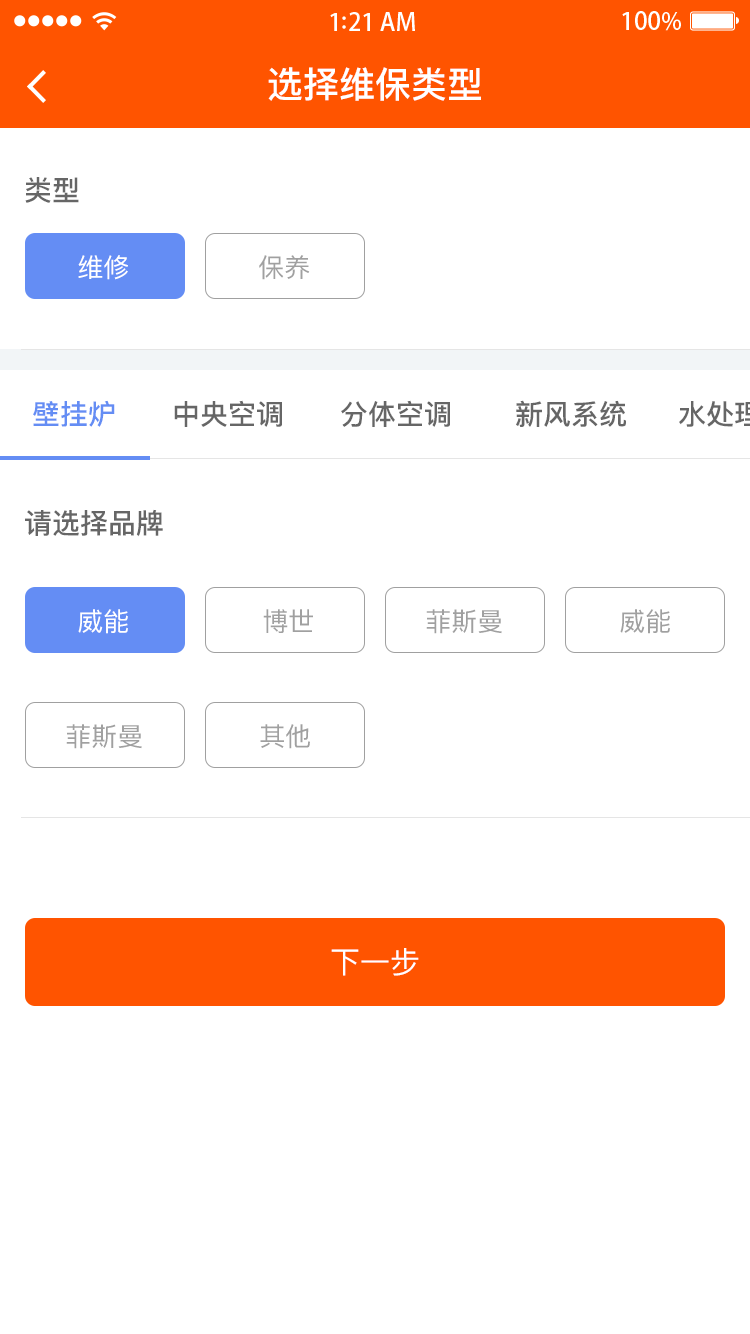
<style>
.page{position:relative;width:750px;height:1334px;background:#ffffff}
.page>*{position:absolute;margin:0}
.t1{font:36px "PingFangSC-Medium";color:#ffffff}
.t2{font:28px "PingFangSC-Medium";color:#666666}
.t3{font:26px "PingFangSC-Regular";color:#ffffff;text-transform:uppercase}
.t4{font:26px "PingFangSC-Regular";color:#a0a0a0;text-transform:uppercase}
.t5{font:28px "PingFangSC-Medium";color:#648df4}
.t6{font:28px "PingFang-SC-Bold";color:#666666}
.t7{font:30px "PingFangSC-Regular";color:#ffffff;text-transform:uppercase}
</style>
<div class="page">
<p class="t1" style="left:268px;top:67px;width:213px;height:34px">选择维保类型</p>
<p class="t2" style="left:25px;top:177px;width:54px;height:26px">类型</p>
<p class="t3" style="left:78px;top:255px;width:50px;height:25px">维修</p>
<p class="t4" style="left:259px;top:255px;width:51px;height:25px">保养</p>
<p class="t5" style="left:33px;top:400px;width:82px;height:27px">壁挂炉</p>
<p class="t2" style="left:174px;top:400px;width:108px;height:27px">中央空调</p>
<p class="t2" style="left:341px;top:400px;width:109px;height:27px">分体空调</p>
<p class="t6" style="left:516px;top:400px;width:110px;height:27px">新风系统</p>
<p class="t2" style="left:25px;top:509px;width:138px;height:28px">请选择品牌</p>
<p class="t3" style="left:78px;top:609px;width:50px;height:25px">威能</p>
<p class="t4" style="left:263px;top:609px;width:50px;height:24px">博世</p>
<p class="t4" style="left:426px;top:609px;width:76px;height:25px">菲斯曼</p>
<p class="t4" style="left:620px;top:609px;width:50px;height:25px">威能</p>
<p class="t4" style="left:66px;top:724px;width:76px;height:25px">菲斯曼</p>
<p class="t4" style="left:260px;top:724px;width:50px;height:25px">其他</p>
<p class="t7" style="left:331px;top:948px;width:88px;height:28px">下一步</p>
</div>
